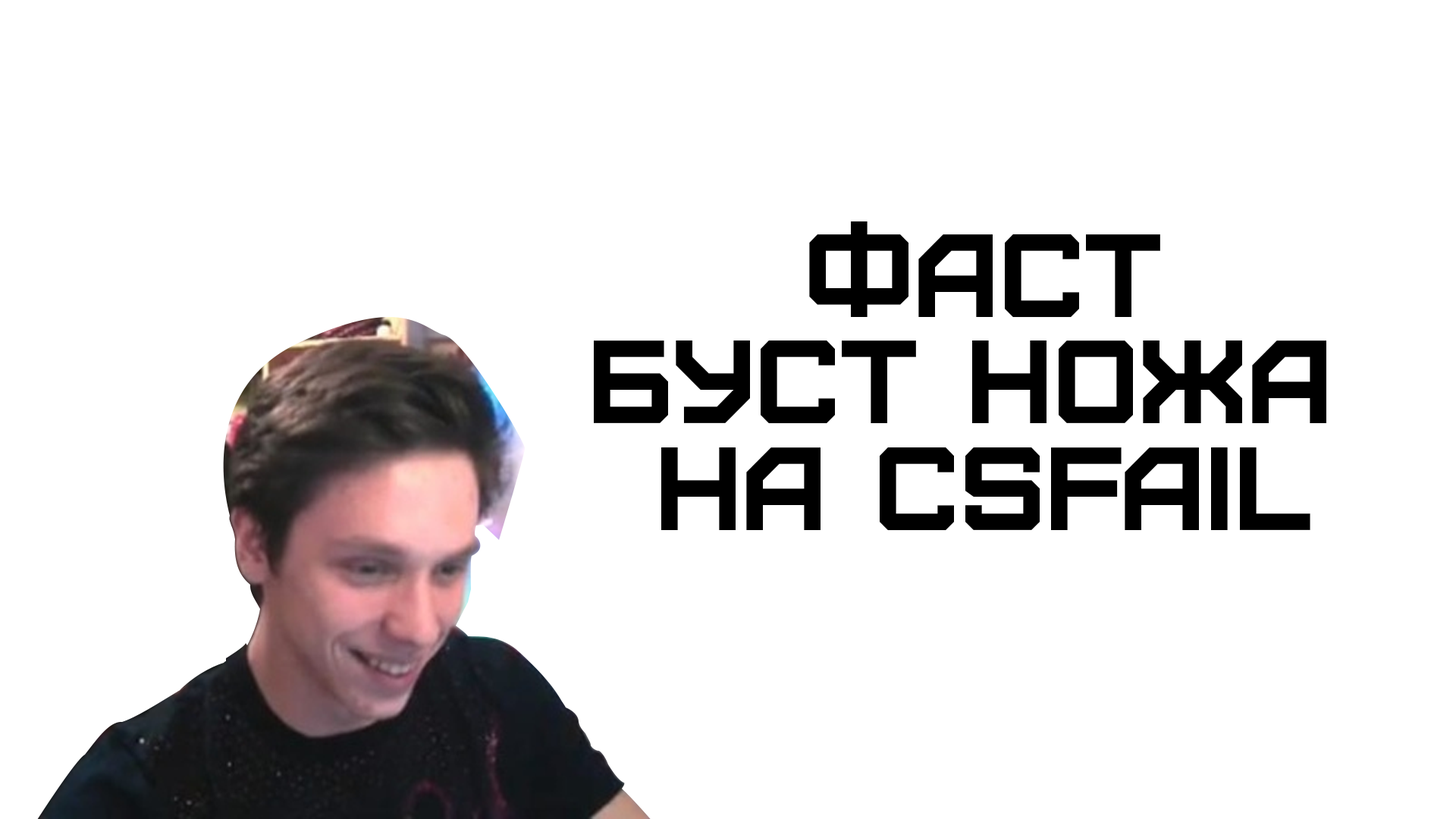
<style>
.page{position:relative;width:1456px;height:819px;background:#ffffff}
.page>*{position:absolute;margin:0}
.t1{font:118.4px/106.6px "Furore";color:#000000}
</style>
<div class="page">
<p class="t1" style="left:594px;top:221px;width:732px;height:310px;text-align:center">ФАСТ<br>БУСТ НОЖА <br>НА CSFAIL</p>
</div>
